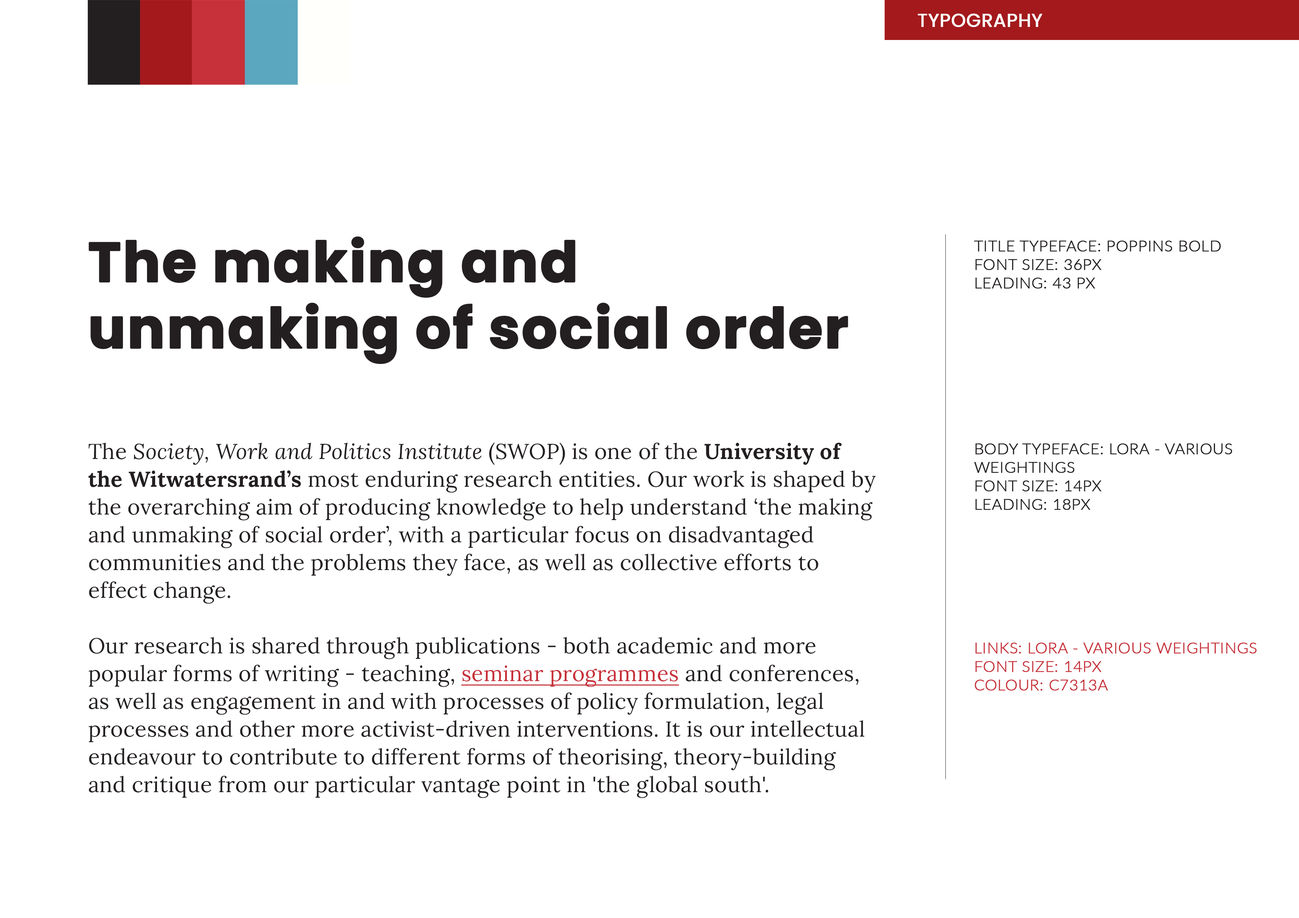
<style>
.page{position:relative;width:1299px;height:918px;background:#ffffff}
.page>*{position:absolute;margin:0}
.t1{font:18.5px "Poppins-Regular";letter-spacing:0.01em;color:#fffffc;font-weight:bold}
.t2{font:55.5px/66.3px "Poppins-Bold";letter-spacing:0.01em;color:#231f20;font-weight:bold}
.t3{font:15.4px "Lato-Light";letter-spacing:0.01em;color:#231f20;font-weight:bold}
.t4{font:21.6px/27.8px "Lora-Regular";letter-spacing:0.01em;color:#231f20;font-weight:bold}
.t5{font:21.6px/27.8px "Lora-Italic";letter-spacing:0.01em;color:#231f20;font-weight:bold}
.t6{font:21.6px/27.8px "Lora-Bold";letter-spacing:0.01em;color:#231f20;font-weight:bold}
.t7{font:21.6px/27.8px "Lora-Regular";letter-spacing:0.01em;color:#c7313a;font-weight:bold;text-decoration:underline}
.t8{font:15.4px "Lato-Light";letter-spacing:0.01em;color:#c7313a;font-weight:bold}
</style>
<div class="page">
<p class="t1" style="left:917px;top:13px;width:125px;height:14px">TYPOGRAPHY</p>
<p class="t2" style="left:88px;top:236px;width:760px;height:128px">The making and unmaking of social order</p>
<p class="t3" style="left:974px;top:241px;width:247px;height:48px">TITLE TYPEFACE: POPPINS BOLD<br>FONT SIZE: 36PX<br>LEADING: 43 PX</p>
<p class="t4" style="left:88px;top:442px;width:788px;height:356px">The <span class="t5">Society, Work and Politics Institute</span> (SWOP) is one of the <span class="t6">University of the Witwatersrand’s</span> most enduring research entities. Our work is shaped by the overarching aim of producing knowledge to help understand ‘the making and unmaking of social order’, with a particular focus on disadvantaged communities and the problems they face, as well as collective efforts to effect change.<br><br>Our research is shared through publications - both academic and more popular forms of writing - teaching, <span class="t7">seminar programmes</span> and conferences, as well as engagement in and with processes of policy formulation, legal processes and other more activist-driven interventions. It is our intellectual endeavour to contribute to different forms of theorising, theory-building and critique from our particular vantage point in 'the global south'.</p>
<p class="t3" style="left:974px;top:444px;width:258px;height:66px">BODY TYPEFACE: LORA - VARIOUS WEIGHTINGS<br>FONT SIZE: 14PX<br>LEADING: 18PX</p>
<p class="t8" style="left:974px;top:643px;width:283px;height:48px">LINKS: LORA - VARIOUS WEIGHTINGS<br>FONT SIZE: 14PX<br>COLOUR: C7313A</p>
</div>
